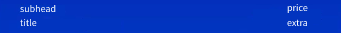
<style>
.page{position:relative;width:341px;height:33px;background:#0134bf}
.page>*{position:absolute;margin:0}
.t1{font:10px "SourceSansPro-Regular"}
.t2{font:10px "SourceSansPro-Regular";color:#ffffff}
</style>
<div class="page">
<p class="t1" style="left:20px;top:4px;width:36px;height:9px">subhead</p>
<p class="t1" style="left:287px;top:4px;width:21px;height:10px">price</p>
<p class="t1" style="left:20px;top:18px;width:17px;height:9px">title</p>
<p class="t2" style="left:287px;top:19px;width:21px;height:8px">extra</p>
</div>
